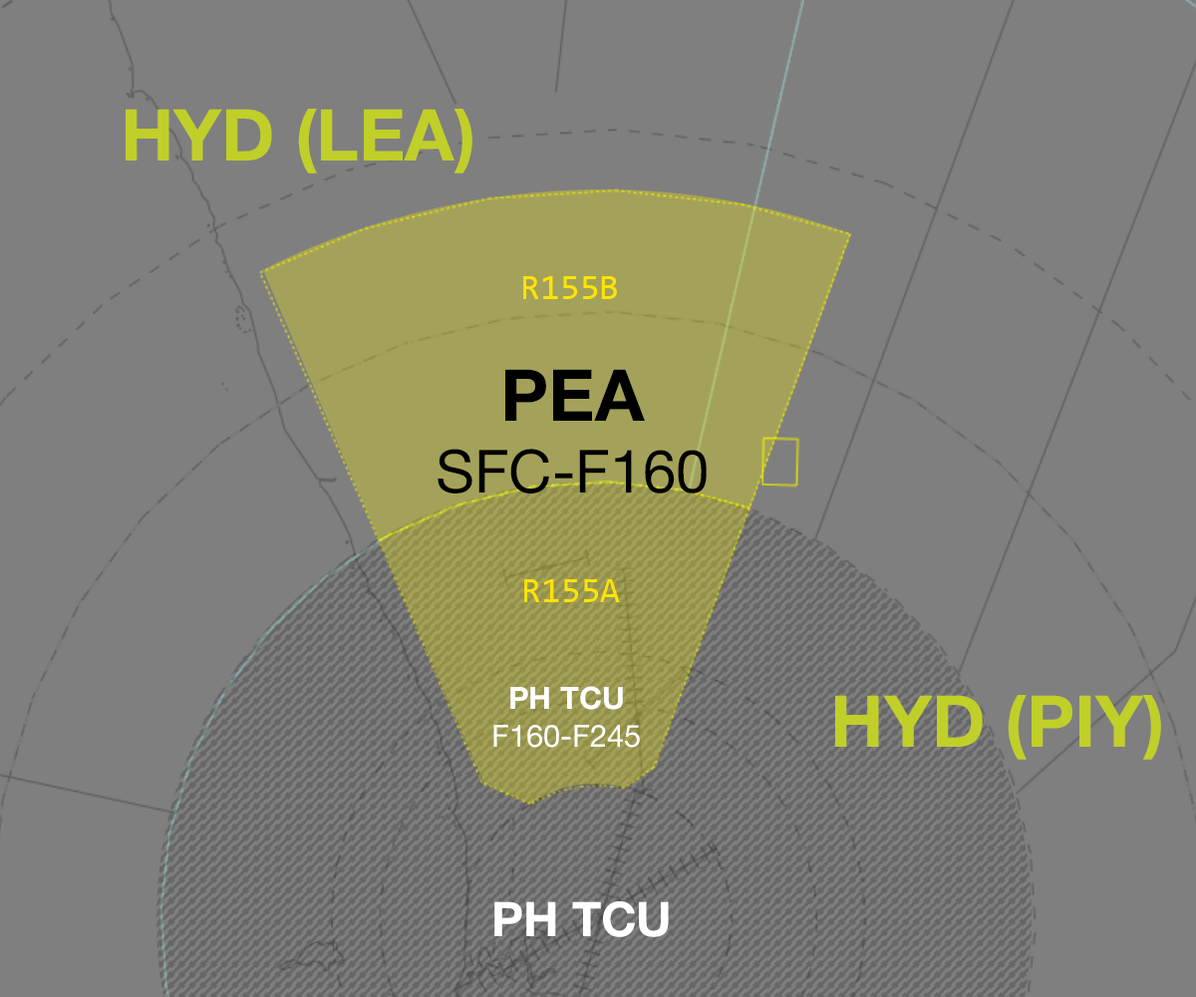
<style>
.page{position:relative;width:1196px;height:997px;background:#7f7f7f}
.page>*{position:absolute;margin:0}
.t1{font:71.8px "HelveticaNeue-Bold";color:#c1cf29}
.t2{font:35.9px "Consolas";color:#ffe400}
.t3{font:59.8px "HelveticaNeue-Roman";color:#000000}
.t4{font:71.8px "HelveticaNeue-Bold";color:#000000}
.t5{font:30.8px "HelveticaNeue-Roman";color:#ffffff}
.t6{font:30.8px "HelveticaNeue-Bold";color:#ffffff}
.t7{font:47.8px "HelveticaNeue-Bold";color:#ffffff}
</style>
<div class="page">
<p class="t1" style="left:126px;top:109px;width:347px;height:64px">HYD (LEA)</p>
<p class="t2" style="left:523px;top:276px;width:94px;height:23px">R155B</p>
<p class="t3" style="left:438px;top:369px;width:269px;height:124px;text-align:center"><span class="t4">PEA<br></span>SFC-F160</p>
<p class="t2" style="left:524px;top:579px;width:96px;height:23px">R155A</p>
<p class="t5" style="left:493px;top:686px;width:147px;height:62px;text-align:center"><span class="t6">PH TCU<br></span>F160-F245</p>
<p class="t1" style="left:835px;top:695px;width:326px;height:65px">HYD (PIY)</p>
<p class="t7" style="left:494px;top:901px;width:175px;height:36px">PH TCU</p>
</div>
